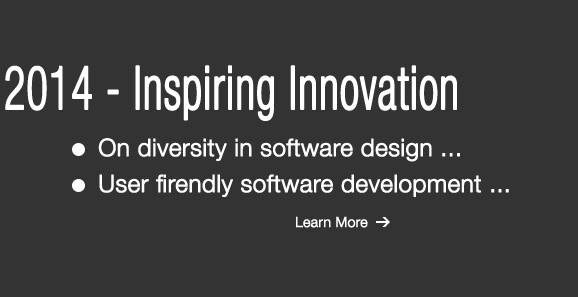
<style>
.page{position:relative;width:578px;height:297px;background:#333333}
.page>*{position:absolute;margin:0}
.t1{font:60px "HelveticaNeueLTPro-LtCn";color:#ffffff;font-weight:bold;scale:0.74 1}
.t2{font:24px/18px "HelveticaNeueLTPro-Lt";color:#ffffff;font-weight:bold}
.t3{font:14px "HelveticaNeueLTPro-Lt";color:#ffffff;font-weight:bold}
</style>
<div class="page">
<p class="t1" style="left:5px;top:65px;width:452px;height:56px">2014 - Inspiring Innovation</p>
<p class="t2" style="left:98px;top:138px;width:411px;height:59px">On diversity in software design ...<br><br>User firendly software development ...</p>
<p class="t3" style="left:296px;top:216px;width:72px;height:12px">Learn More</p>
</div>
